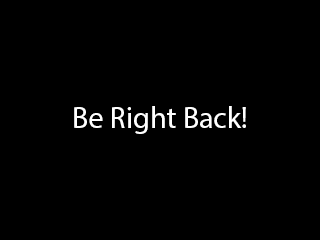
<style>
.page{position:relative;width:320px;height:240px;background:#000000}
.page>*{position:absolute;margin:0}
.t1{font:30px "MyriadPro-Regular";color:#ffffff}
</style>
<div class="page">
<p class="t1" style="left:74px;top:106px;width:172px;height:28px">Be Right Back!</p>
</div>
